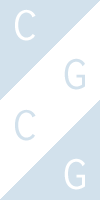
<style>
.page{position:relative;width:100px;height:200px;background:#d2e1ec}
.page>*{position:absolute;margin:0}
.t1{font:48px "Inconsolata";color:#ffffff}
.t2{font:48px "Inconsolata";color:#d2e1ec}
</style>
<div class="page">
<p class="t1" style="left:15px;top:9px;width:21px;height:32px">C</p>
<p class="t2" style="left:64px;top:58px;width:21px;height:32px">G</p>
<p class="t2" style="left:15px;top:109px;width:21px;height:32px">C</p>
<p class="t1" style="left:64px;top:158px;width:21px;height:32px">G</p>
</div>
